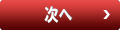
<style>
.page{position:relative;width:120px;height:30px}
.page>*{position:absolute;margin:0}
.t1{font:18px "HGSSoeiKakugothicUB";color:#ffffff;scale:0.8 1}
</style>
<div class="page">
<p class="t1" style="left:44px;top:6px;width:28px;height:17px">次へ</p>
<p class="t1" style="left:45px;top:6px;width:28px;height:17px">次へ</p>
</div>
